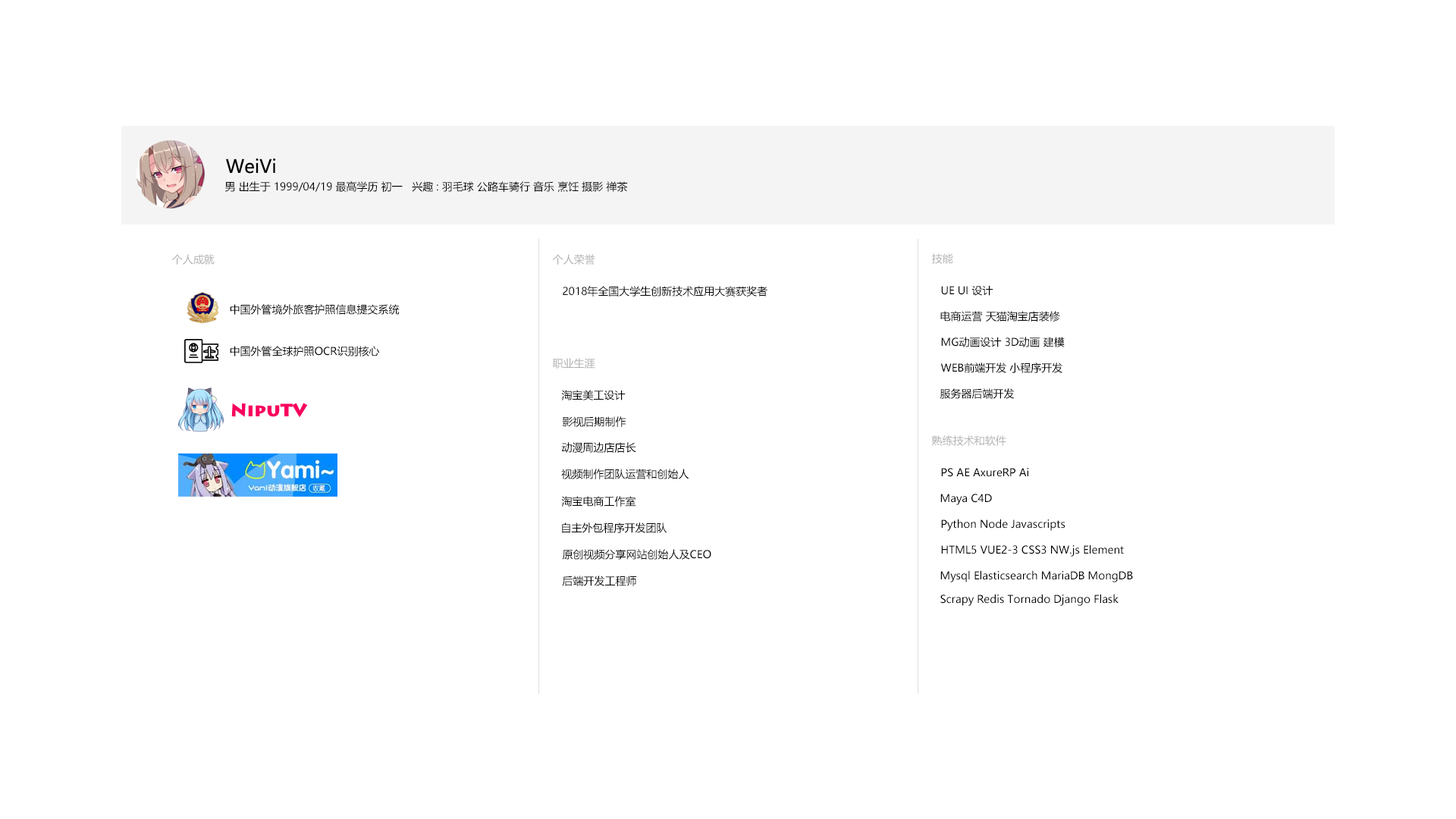
<style>
.page{position:relative;width:1456px;height:819px;background:#ffffff}
.page>*{position:absolute;margin:0}
.t1{font:18.2px "MicrosoftYaHeiUI";color:#000000}
.t2{font:10.6px "MicrosoftYaHeiUI";color:#000000}
.t3{font:10.6px "MicrosoftYaHeiUI";color:#b1b1b1}
</style>
<div class="page">
<p class="t1" style="left:226px;top:158px;width:50px;height:16px">WeiVi</p>
<p class="t2" style="left:224px;top:181px;width:404px;height:11px">男 出生于 1999/04/19 最高学历 初一   兴趣 : 羽毛球 公路车骑行 音乐 烹饪 摄影 禅茶</p>
<p class="t3" style="left:171px;top:254px;width:44px;height:11px">个人成就</p>
<p class="t3" style="left:552px;top:254px;width:43px;height:11px">个人荣誉</p>
<p class="t3" style="left:932px;top:253px;width:21px;height:11px">技能</p>
<p class="t2" style="left:563px;top:286px;width:204px;height:11px">2018年全国大学生创新技术应用大赛获奖者</p>
<p class="t2" style="left:941px;top:285px;width:52px;height:11px">UE UI 设计</p>
<p class="t2" style="left:230px;top:304px;width:170px;height:11px">中国外管境外旅客护照信息提交系统</p>
<p class="t2" style="left:940px;top:311px;width:120px;height:11px">电商运营 天猫淘宝店装修</p>
<p class="t2" style="left:941px;top:337px;width:124px;height:10px">MG动画设计 3D动画 建模</p>
<p class="t2" style="left:230px;top:346px;width:150px;height:10px">中国外管全球护照OCR识别核心</p>
<p class="t3" style="left:553px;top:358px;width:42px;height:11px">职业生涯</p>
<p class="t2" style="left:940px;top:362px;width:122px;height:11px">WEB前端开发 小程序开发</p>
<p class="t2" style="left:561px;top:390px;width:65px;height:10px">淘宝美工设计</p>
<p class="t2" style="left:940px;top:388px;width:75px;height:11px">服务器后端开发</p>
<p class="t2" style="left:562px;top:416px;width:64px;height:11px">影视后期制作</p>
<p class="t3" style="left:931px;top:435px;width:75px;height:11px">熟练技术和软件</p>
<p class="t2" style="left:561px;top:442px;width:75px;height:11px">动漫周边店店长</p>
<p class="t2" style="left:561px;top:469px;width:128px;height:10px">视频制作团队运营和创始人</p>
<p class="t2" style="left:941px;top:468px;width:88px;height:9px">PS AE AxureRP Ai</p>
<p class="t2" style="left:561px;top:496px;width:75px;height:11px">淘宝电商工作室</p>
<p class="t2" style="left:940px;top:494px;width:52px;height:11px">Maya C4D</p>
<p class="t2" style="left:941px;top:519px;width:124px;height:12px">Python Node Javascripts</p>
<p class="t2" style="left:562px;top:522px;width:105px;height:11px">自主外包程序开发团队</p>
<p class="t2" style="left:941px;top:544px;width:183px;height:13px">HTML5 VUE2-3 CSS3 NW.js Element</p>
<p class="t2" style="left:562px;top:549px;width:149px;height:11px">原创视频分享网站创始人及CEO</p>
<p class="t2" style="left:562px;top:576px;width:75px;height:10px">后端开发工程师</p>
<p class="t2" style="left:940px;top:570px;width:193px;height:12px">Mysql Elasticsearch MariaDB MongDB</p>
<p class="t2" style="left:940px;top:594px;width:179px;height:12px">Scrapy Redis Tornado Django Flask</p>
</div>
